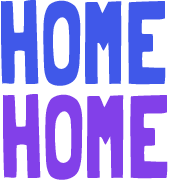
<style>
.page{position:relative;width:170px;height:180px;background:#ffffff}
.page>*{position:absolute;margin:0}
.t1{font:118.7px "Folk-solid";color:#4058e9;scale:0.73 1}
.t2{font:118.7px "Folk-solid";color:#8240e9;scale:0.73 1}
</style>
<div class="page">
<p class="t1" style="left:1px;top:0px;width:165px;height:86px">HOME</p>
<p class="t2" style="left:3px;top:94px;width:165px;height:86px">HOME</p>
</div>
